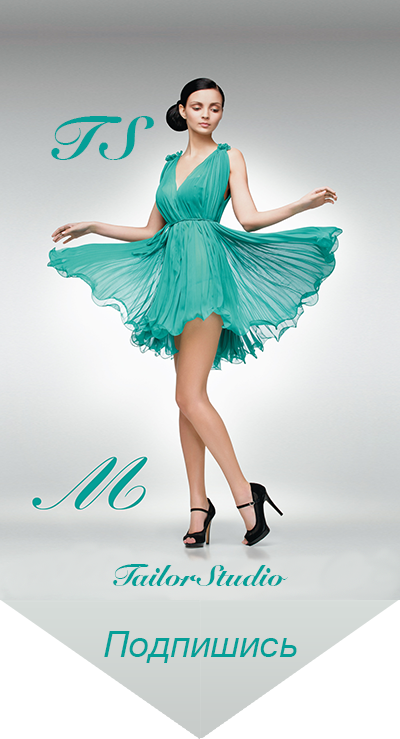
<style>
.page{position:relative;width:400px;height:739px}
.page>*{position:absolute;margin:0}
.t1{font:60px "SnellRoundhand-Black";color:#049f97}
.t2{font:30px "SnellRoundhand-Black";color:#049f97}
.t3{font:36px "HelveticaNeue-Italic";color:#049f97}
</style>
<div class="page">
<p class="t1" style="left:51px;top:116px;width:103px;height:44px">TS</p>
<p class="t2" style="left:113px;top:564px;width:175px;height:22px">TailorStudio</p>
<p class="t3" style="left:104px;top:631px;width:193px;height:32px">Подпишись</p>
</div>
